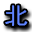
<style>
.page{position:relative;width:32px;height:32px;background:#ffffff}
.page>*{position:absolute;margin:0}
.t1{font:23.6px "SimHei";letter-spacing:-0.06em;color:#6085ff}
</style>
<div class="page">
<p class="t1" style="left:5px;top:5px;width:23px;height:21px">北</p>
</div>
